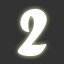
<style>
.page{position:relative;width:64px;height:64px;background:#333333}
.page>*{position:absolute;margin:0}
.t1{font:72px "ForteMT";color:#ffffff}
</style>
<div class="page">
<p class="t1" style="left:17px;top:9px;width:30px;height:47px">2</p>
</div>
